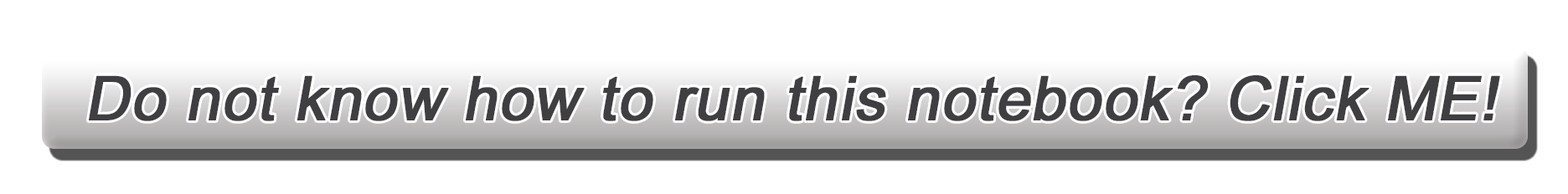
<style>
.page{position:relative;width:1568px;height:194px;background:#ffffff}
.page>*{position:absolute;margin:0}
.t1{font:104.7px "ArialMT";color:#3f3f41;font-weight:bold;font-style:italic}
</style>
<div class="page">
<p class="t1" style="left:89px;top:75px;width:1411px;height:46px">Do not know how to run this notebook? Click ME!</p>
</div>
